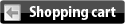
<style>
.page{position:relative;width:125px;height:24px;background:#4d4d4d}
.page>*{position:absolute;margin:0}
.t1{font:13.2px "KozGoPro-Heavy";color:#ffffff}
</style>
<div class="page">
<p class="t1" style="left:29px;top:6px;width:87px;height:14px">Shopping cart</p>
</div>
